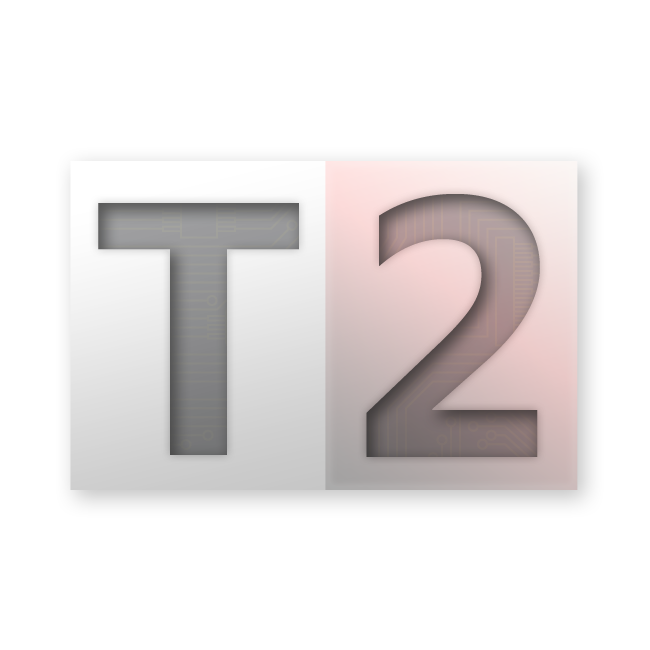
<style>
.page{position:relative;width:650px;height:650px;background:#ffffff}
.page>*{position:absolute;margin:0}
.t1{font:360px "SegoeUI-Bold";letter-spacing:0.12em;color:#818181}
.t2{font:370px "SegoeUI-Bold";letter-spacing:0.18em;color:#585858}
</style>
<div class="page">
<p class="t1" style="left:98px;top:194px;width:442px;height:263px;opacity:0.66">T<span class="t2">2</span></p>
</div>
